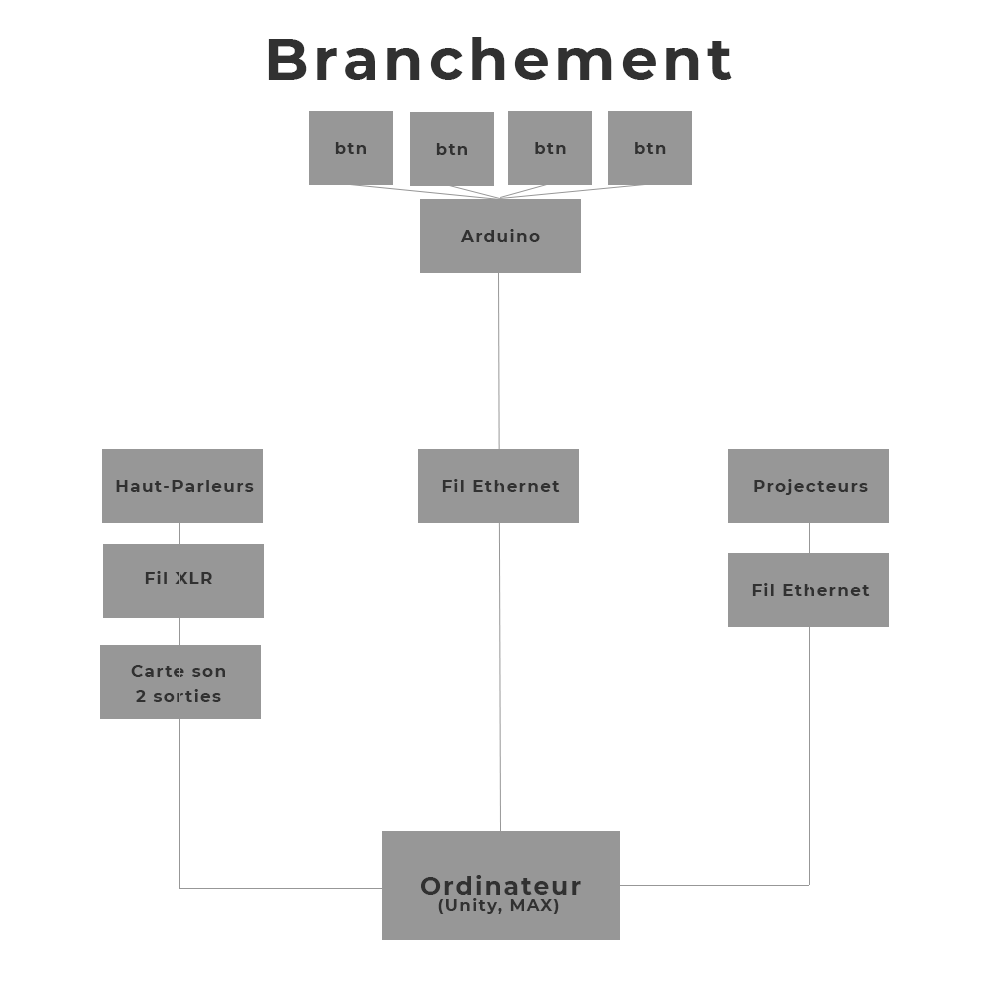
<style>
.page{position:relative;width:1000px;height:1000px;background:#ffffff}
.page>*{position:absolute;margin:0}
.t1{font:58.3px "Montserrat-Bold";letter-spacing:0.08em;color:#313131}
.t2{font:16.9px "Montserrat-Bold";letter-spacing:0.08em;color:#313131}
.t3{font:16.8px "Montserrat-Bold";letter-spacing:0.08em;color:#313131}
.t4{font:16.8px/25px "Montserrat-Bold";letter-spacing:0.08em;color:#313131}
.t5{font:25px "Montserrat-Bold";letter-spacing:0.08em;color:#313131}
.t6{font:16.7px "Montserrat-Bold";letter-spacing:0.08em;color:#313131}
</style>
<div class="page">
<p class="t1" style="left:268px;top:37px;width:464px;height:43px">Branchement</p>
<p class="t2" style="left:335px;top:142px;width:31px;height:12px">btn</p>
<p class="t2" style="left:436px;top:143px;width:31px;height:12px">btn</p>
<p class="t2" style="left:535px;top:142px;width:31px;height:12px">btn</p>
<p class="t2" style="left:635px;top:142px;width:31px;height:12px">btn</p>
<p class="t3" style="left:460px;top:229px;width:80px;height:13px">Arduino</p>
<p class="t3" style="left:116px;top:480px;width:138px;height:12px">Haut-Parleurs</p>
<p class="t3" style="left:442px;top:479px;width:118px;height:13px">Fil Ethernet</p>
<p class="t3" style="left:754px;top:479px;width:114px;height:16px">Projecteurs</p>
<p class="t3" style="left:145px;top:571px;width:67px;height:13px">Fil XLR</p>
<p class="t3" style="left:752px;top:583px;width:118px;height:13px">Fil Ethernet</p>
<p class="t4" style="left:131px;top:665px;width:94px;height:37px;text-align:center">Carte son<br>2 sorties</p>
<p class="t5" style="left:421px;top:875px;width:160px;height:20px">Ordinateur</p>
<p class="t6" style="left:438px;top:898px;width:121px;height:16px">(Unity, MAX)</p>
</div>
